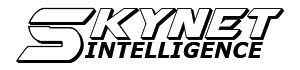
<style>
.page{position:relative;width:300px;height:70px;background:#ffffff}
.page>*{position:absolute;margin:0}
.t1{font:96px "AirstrikeBullet";color:#000000}
.t2{font:53.3px "AirstrikeBold3D";color:#000000}
.t3{font:21.3px "Verdana-BoldItalic";color:#000000}
</style>
<div class="page">
<p class="t1" style="left:16px;top:7px;width:81px;height:56px">S</p>
<p class="t2" style="left:89px;top:8px;width:196px;height:32px">kynet</p>
<p class="t3" style="left:85px;top:42px;width:178px;height:16px">INTELLIGENCE</p>
</div>
